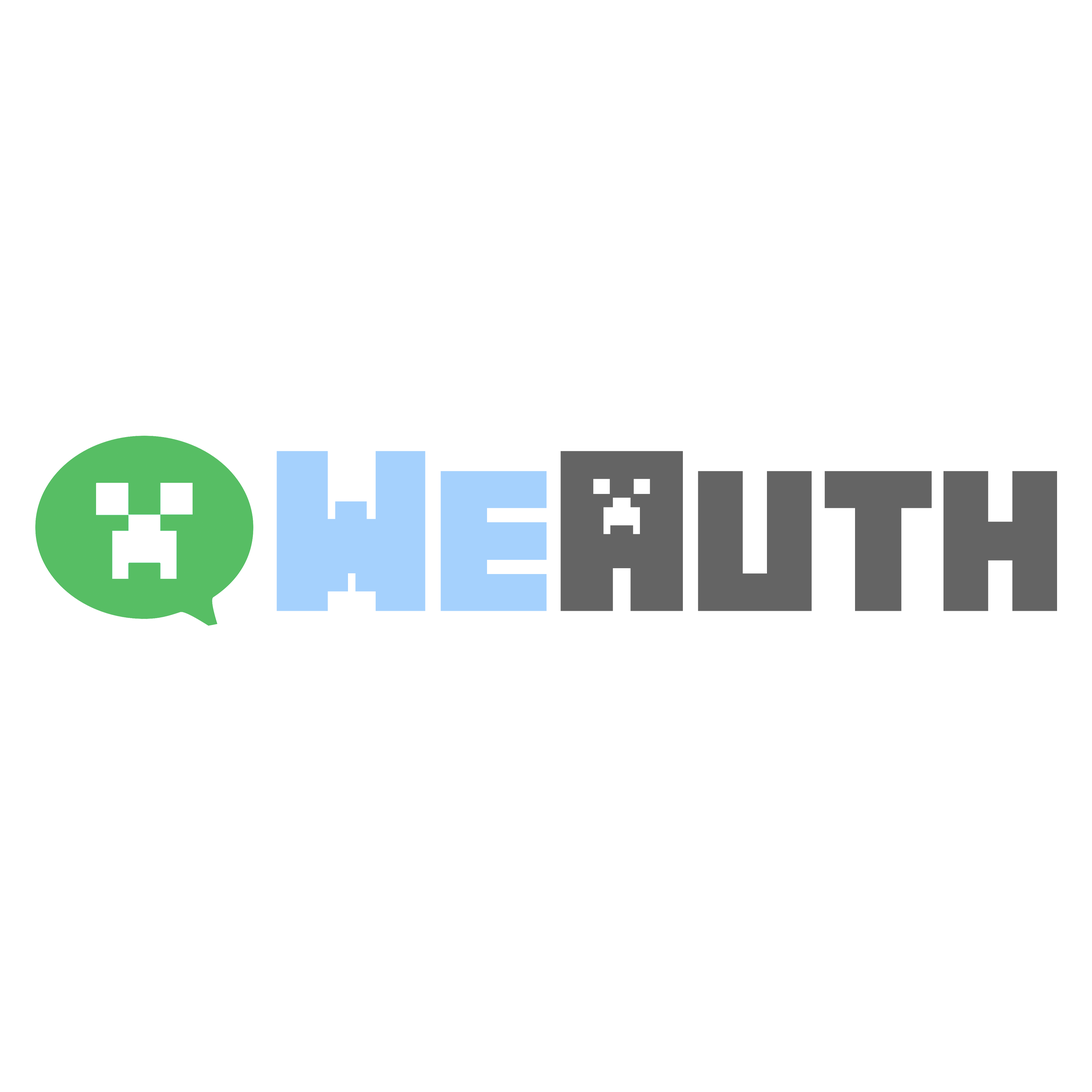
<style>
.page{position:relative;width:1092px;height:1092px;background:#ffffff}
.page>*{position:absolute;margin:0}
.t1{font:178.4px "Minecrafter";color:#646464}
.t2{font:203.8px "Minecrafter";color:#a5d1fd}
.t3{font:178.4px "Minecrafter";color:#a5d1fd}
.t4{font:203.8px "Minecrafter";color:#646464}
</style>
<div class="page">
<p class="t1" style="left:277px;top:451px;width:780px;height:160px"><span class="t2">W</span><span class="t3">E</span><span class="t4">a</span>uth</p>
</div>
